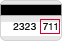
<style>
.page{position:relative;width:62px;height:41px;background:#e6e6e6}
.page>*{position:absolute;margin:0}
.t1{font:10px "HelveticaNeue-Roman";letter-spacing:0.025em;color:#111111}
.t2{font:10px "HelveticaNeue-Roman";letter-spacing:-0.025em;color:#111111}
</style>
<div class="page">
<p class="t1" style="left:13px;top:23px;width:23px;height:7px">2323</p>
<p class="t2" style="left:43px;top:23px;width:14px;height:7px">711</p>
</div>
